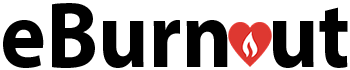
<style>
.page{position:relative;width:350px;height:70px;background:#ffffff}
.page>*{position:absolute;margin:0}
.t1{font:22.9px "MyriadPro-Bold";color:#000000;scale:0.91 1}
</style>
<div class="page">
<p class="t1" style="left:3px;top:3px;width:345px;height:65px">eBurn  ut</p>
</div>
